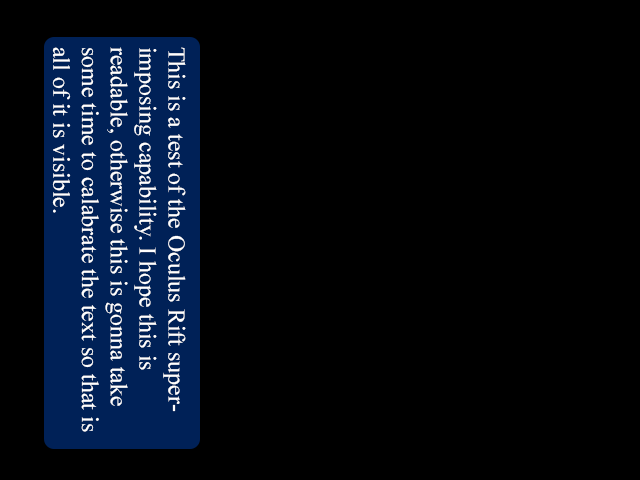
<style>
.page{position:relative;width:640px;height:480px;background:#000000}
.page>*{position:absolute;margin:0}
.t1{font:24px "TimesNewRomanPSMT";color:#ffffff}
</style>
<div class="page">
<p class="t1" style="left:52px;top:47px;width:134px;height:385px;rotate:90deg">This is a test of the Oculus Rift super-<br>imposing capability. I hope this is<br>readable, otherwise this is gonna take <br>some time to calabrate the text so that is <br>all of it is visible.</p>
</div>
